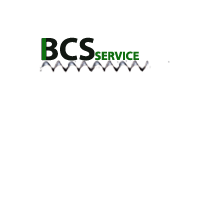
<style>
.page{position:relative;width:220px;height:220px;background:#ffffff}
.page>*{position:absolute;margin:0}
.t1{font:32.3px "MyriadPro-Bold";color:#121812;text-transform:uppercase}
.t2{font:12px "MyriadPro-Bold";color:#106d10;text-transform:uppercase}
</style>
<div class="page">
<p class="t1" style="left:41px;top:37px;width:54px;height:24px">Bcs</p>
<p class="t2" style="left:95px;top:51px;width:44px;height:10px">service</p>
</div>
